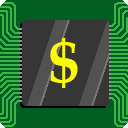
<style>
.page{position:relative;width:128px;height:128px;background:#005e20}
.page>*{position:absolute;margin:0}
.t1{font:60px "BookAntiqua-Bold";color:#fdfa01}
</style>
<div class="page">
<p class="t1" style="left:50px;top:38px;width:28px;height:50px">$</p>
</div>
